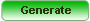
<style>
.page{position:relative;width:90px;height:21px}
.page>*{position:absolute;margin:0}
.t1{font:11px "Arial-BoldMT";color:#223809}
</style>
<div class="page">
<p class="t1" style="left:21px;top:6px;width:50px;height:8px">Generate</p>
</div>
